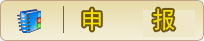
<style>
.page{position:relative;width:204px;height:41px}
.page>*{position:absolute;margin:0}
.t1{font:24px "SimHei";color:#f5e000}
</style>
<div class="page">
<p class="t1" style="left:83px;top:8px;width:92px;height:23px">申    报</p>
</div>
